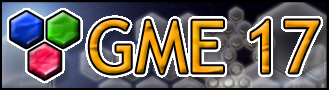
<style>
.page{position:relative;width:329px;height:90px}
.page>*{position:absolute;margin:0}
.t1{font:72.6px "TrebuchetMS";letter-spacing:-0.002em}
</style>
<div class="page">
<p class="t1" style="left:89px;top:19px;width:230px;height:55px">GME 17</p>
</div>
